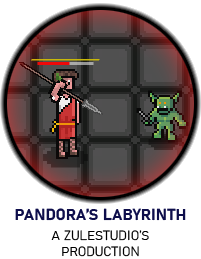
<style>
.page{position:relative;width:201px;height:259px;background:#ffffff}
.page>*{position:absolute;margin:0}
.t1{font:16px "Bahnschrift-Bold";color:#0e0e4b}
.t2{font:13.3px "Bahnschrift-Light";color:#000000}
</style>
<div class="page">
<p class="t1" style="left:15px;top:208px;width:171px;height:13px">PANDORA’S LABYRINTH</p>
<p class="t2" style="left:51px;top:230px;width:98px;height:27px;text-align:center">A ZULESTUDIO’S<br>PRODUCTION</p>
</div>
